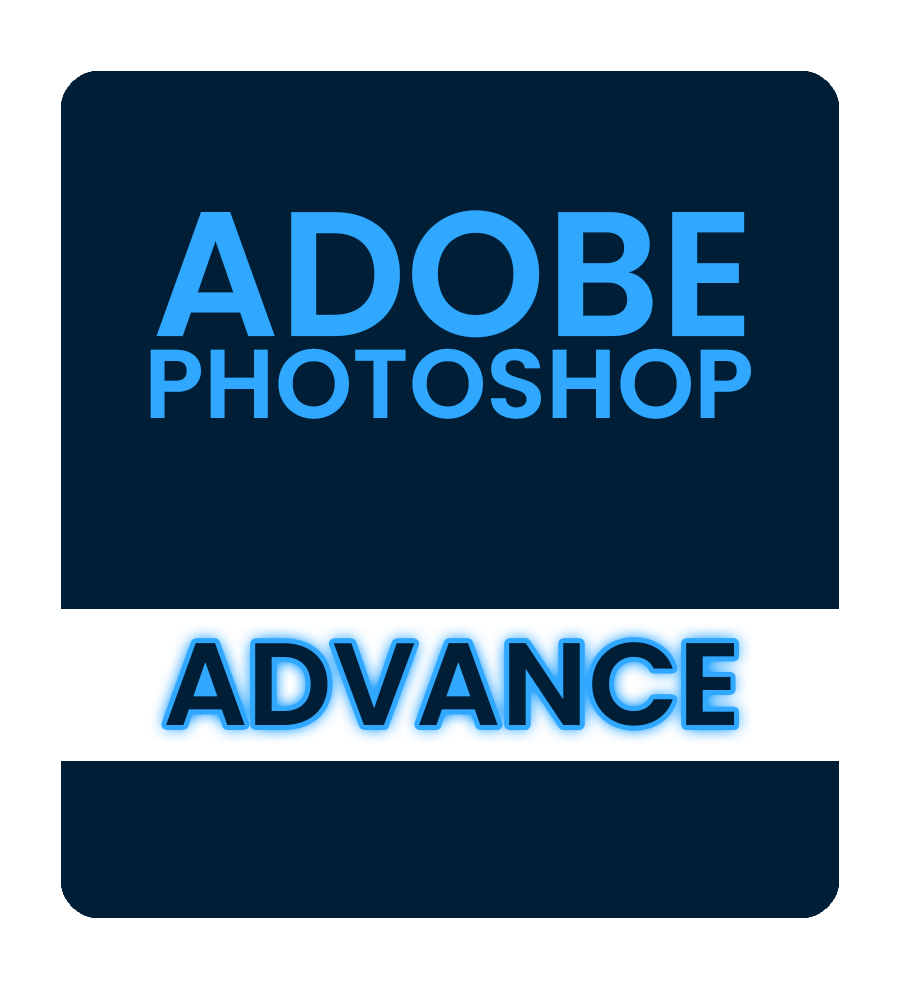
<style>
.page{position:relative;width:900px;height:990px;background:#001e36}
.page>*{position:absolute;margin:0}
.t1{font:177.3px "Poppins-SemiBold";color:#31a8ff}
.t2{font:97.7px "Poppins-SemiBold";color:#31a8ff}
.t3{font:117.2px "Poppins-SemiBold";color:#001e36}
</style>
<div class="page">
<p class="t1" style="left:156px;top:210px;width:589px;height:128px">ADOBE</p>
<p class="t2" style="left:150px;top:348px;width:601px;height:71px">PHOTOSHOP</p>
<p class="t3" style="left:166px;top:642px;width:569px;height:84px">ADVANCE</p>
</div>
